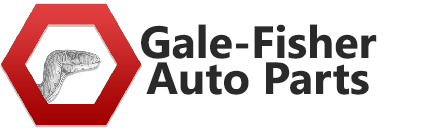
<style>
.page{position:relative;width:440px;height:130px;background:#ffffff}
.page>*{position:absolute;margin:0}
.t1{font:45px/36px "SegoeUI-Bold";color:#2a2a2a}
</style>
<div class="page">
<p class="t1" style="left:141px;top:24px;width:236px;height:71px;text-align:center">Gale-Fisher<br>Auto Parts</p>
</div>
